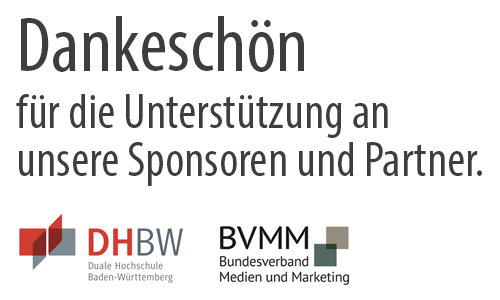
<style>
.page{position:relative;width:500px;height:300px;background:#ffffff}
.page>*{position:absolute;margin:0}
.t1{font:50px/48px "MyriadPro-Cond";color:#3e3d40}
.t2{font:78.8px/67.7px "MyriadPro-Cond";color:#3e3d40}
.t3{font:50px/57px "MyriadPro-Cond";color:#3e3d40}
</style>
<div class="page">
<p class="t1" style="left:16px;top:16px;width:466px;height:170px"><span class="t2">Dankeschön<br></span><span class="t3">für die Unterstützung an <br></span>unsere Sponsoren und Partner.</p>
</div>
